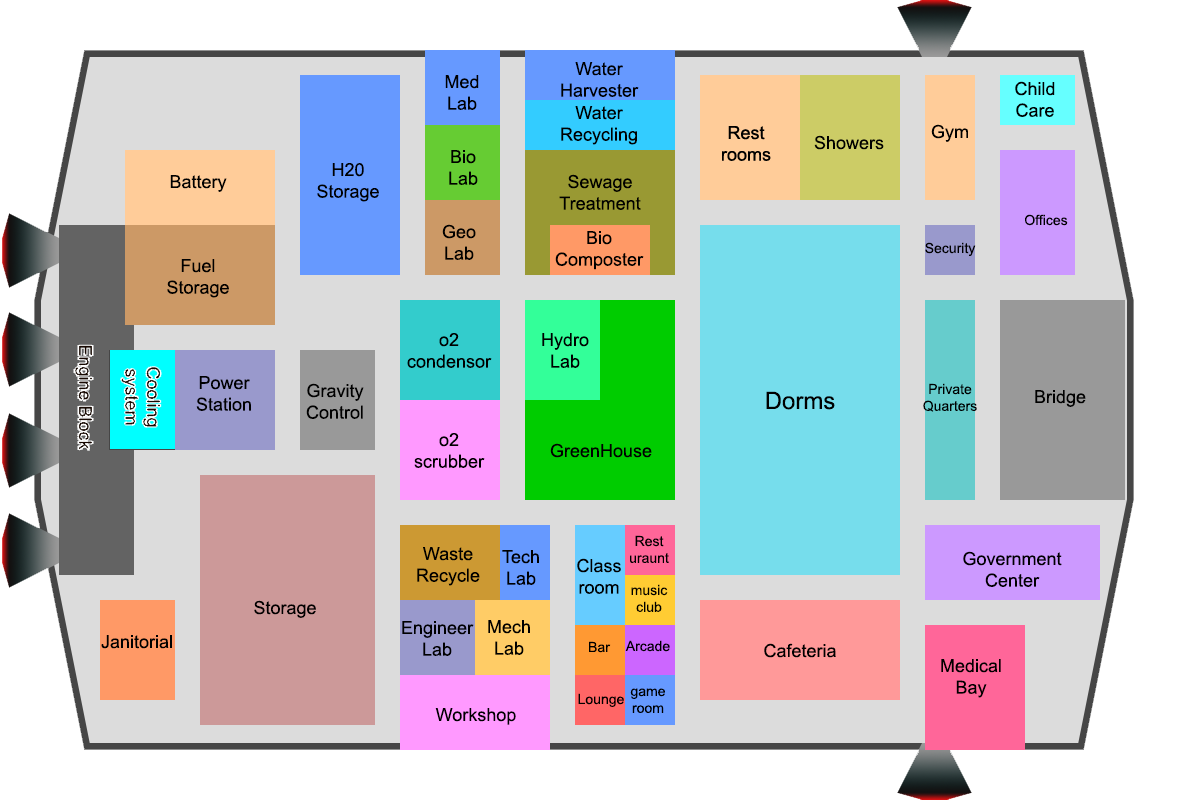
<style>
.page{position:relative;width:1200px;height:800px;background:#dcdcdc}
.page>*{position:absolute;margin:0}
.t1{font:18px "ArialMT";color:#000000}
.t2{font:14px "ArialMT";color:#000000}
</style>
<div class="page">
<p class="t1" style="left:561px;top:62px;width:78px;height:35px;text-align:center">Water<br>Harvester</p>
<p class="t1" style="left:445px;top:75px;width:34px;height:35px;text-align:center">Med<br>Lab</p>
<p class="t1" style="left:1015px;top:81px;width:40px;height:36px;text-align:center">Child<br>Care</p>
<p class="t1" style="left:561px;top:106px;width:76px;height:39px;text-align:center">Water<br>Recycling</p>
<p class="t1" style="left:931px;top:124px;width:37px;height:18px">Gym</p>
<p class="t1" style="left:814px;top:135px;width:70px;height:15px">Showers</p>
<p class="t1" style="left:449px;top:150px;width:29px;height:35px;text-align:center">Bio<br>Lab</p>
<p class="t1" style="left:317px;top:163px;width:62px;height:39px;text-align:center">H20<br>Storage</p>
<p class="t1" style="left:559px;top:174px;width:82px;height:36px;text-align:center">Sewage<br>Treatment</p>
<p class="t1" style="left:170px;top:175px;width:57px;height:17px">Battery</p>
<p class="t2" style="left:1025px;top:214px;width:43px;height:12px">Offices</p>
<p class="t1" style="left:442px;top:224px;width:34px;height:36px;text-align:center">Geo<br>Lab</p>
<p class="t1" style="left:555px;top:231px;width:89px;height:39px;text-align:center">Bio<br>Composter</p>
<p class="t2" style="left:925px;top:242px;width:51px;height:14px">Security</p>
<p class="t1" style="left:167px;top:259px;width:62px;height:39px;text-align:center">Fuel<br>Storage</p>
<p class="t1" style="left:407px;top:333px;width:85px;height:35px;text-align:center">o2<br>condensor</p>
<p class="t1" style="left:542px;top:333px;width:47px;height:35px;text-align:center">Hydro<br>Lab</p>
<p class="t1" style="left:196px;top:376px;width:55px;height:35px;text-align:center">Power<br>Station</p>
<p class="t1" style="left:306px;top:383px;width:58px;height:36px;text-align:center">Gravity<br>Control</p>
<p class="t2" style="left:923px;top:383px;width:54px;height:29px;text-align:center">Private<br>Quarters</p>
<p class="t1" style="left:1035px;top:390px;width:51px;height:17px">Bridge</p>
<p class="t1" style="left:414px;top:433px;width:71px;height:35px;text-align:center">o2<br>scrubber</p>
<p class="t1" style="left:550px;top:443px;width:102px;height:15px">GreenHouse</p>
<p class="t2" style="left:630px;top:535px;width:39px;height:28px;text-align:center">Rest<br>uraunt</p>
<p class="t1" style="left:417px;top:547px;width:63px;height:39px;text-align:center">Waste<br>Recycle</p>
<p class="t1" style="left:502px;top:550px;width:37px;height:35px;text-align:center">Tech<br>Lab</p>
<p class="t1" style="left:577px;top:558px;width:44px;height:36px;text-align:center">Class<br>room</p>
<p class="t1" style="left:963px;top:551px;width:99px;height:36px;text-align:center">Government<br>Center</p>
<p class="t2" style="left:631px;top:584px;width:37px;height:28px;text-align:center">music<br>club</p>
<p class="t1" style="left:254px;top:600px;width:62px;height:18px">Storage</p>
<p class="t1" style="left:402px;top:621px;width:72px;height:35px;text-align:center">Engineer<br>Lab</p>
<p class="t1" style="left:488px;top:620px;width:42px;height:35px;text-align:center">Mech<br>Lab</p>
<p class="t1" style="left:101px;top:635px;width:71px;height:14px">Janitorial</p>
<p class="t2" style="left:589px;top:641px;width:22px;height:12px">Bar</p>
<p class="t2" style="left:625px;top:640px;width:45px;height:12px">Arcade</p>
<p class="t1" style="left:764px;top:643px;width:72px;height:15px">Cafeteria</p>
<p class="t1" style="left:941px;top:659px;width:60px;height:39px;text-align:center">Medical<br>Bay</p>
<p class="t2" style="left:630px;top:688px;width:35px;height:25px;text-align:center">game<br>room</p>
<p class="t2" style="left:578px;top:693px;width:46px;height:14px">Lounge</p>
<p class="t1" style="left:435px;top:708px;width:81px;height:17px">Workshop</p>
</div>
